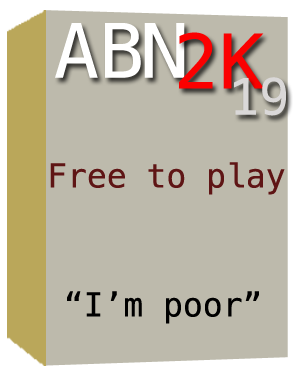
<style>
.page{position:relative;width:300px;height:375px;background:#bdbaac}
.page>*{position:absolute;margin:0}
.t1{font:75px "Menlo-Regular";color:#ffffff}
.t2{font:75px "Menlo-Regular";color:#fb0000}
.t3{font:50px "Menlo-Regular";color:#dad8d8}
.t4{font:33px "Menlo-Regular";color:#5f1515}
.t5{font:33px "Menlo-Regular";color:#000000}
</style>
<div class="page">
<p class="t1" style="left:55px;top:23px;width:130px;height:55px">ABN</p>
<p class="t2" style="left:179px;top:32px;width:85px;height:57px">2K</p>
<p class="t3" style="left:234px;top:77px;width:52px;height:39px">19</p>
<p class="t4" style="left:50px;top:162px;width:235px;height:33px">Free to play</p>
<p class="t5" style="left:67px;top:291px;width:192px;height:33px">“I’m poor”</p>
</div>
